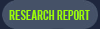
<style>
.page{position:relative;width:100px;height:29px;background:#455167}
.page>*{position:absolute;margin:0}
.t1{font:10.5px "Bebas";color:#9cff00}
</style>
<div class="page">
<p class="t1" style="left:9px;top:10px;width:81px;height:10px">research   report</p>
</div>
